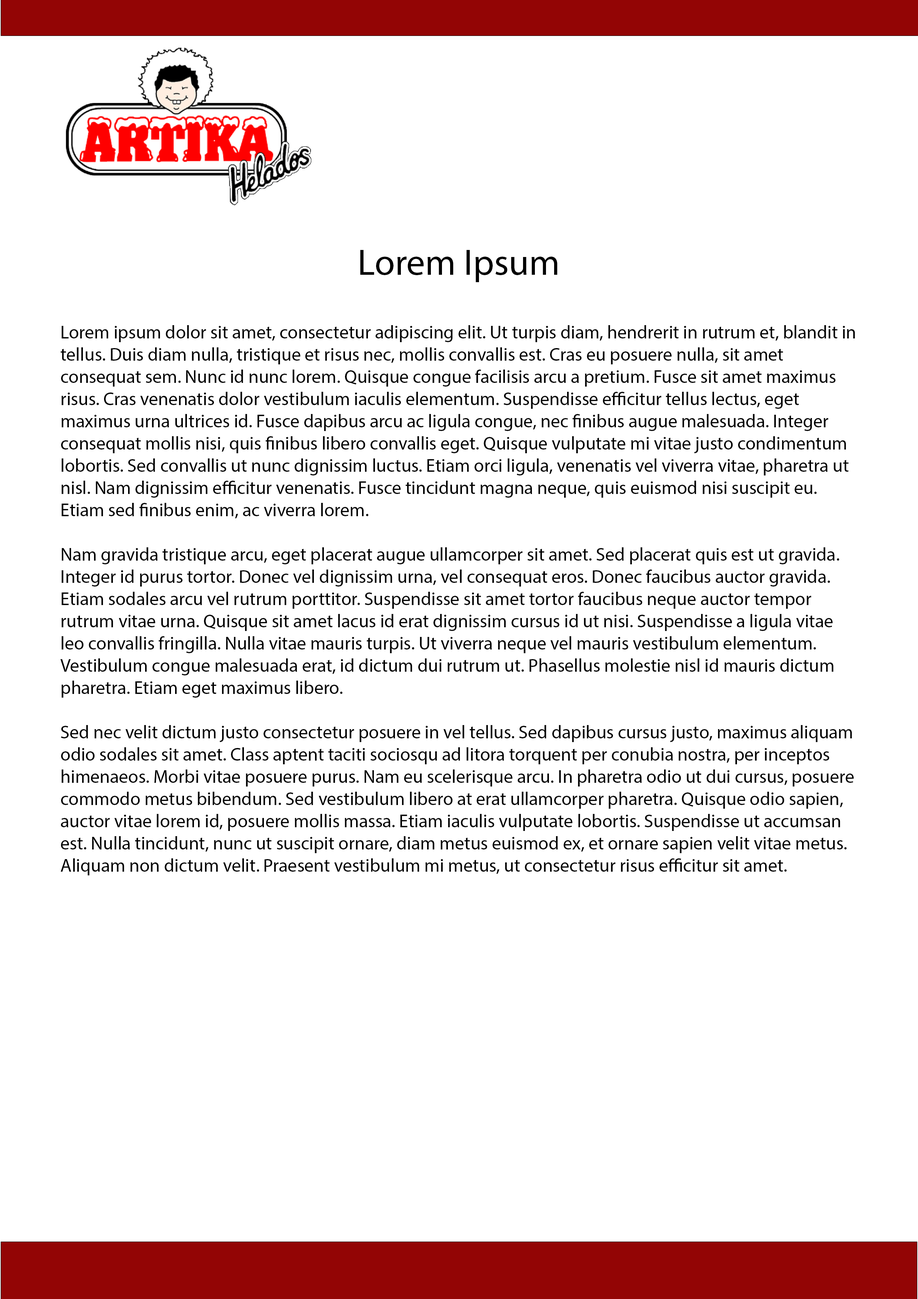
<style>
.page{position:relative;width:918px;height:1299px;background:#ffffff}
.page>*{position:absolute;margin:0}
.t1{font:37px "MyriadPro-Regular";color:#000000}
.t2{font:18.5px "MyriadPro-Regular";color:#000000}
</style>
<div class="page">
<p class="t1" style="left:360px;top:250px;width:198px;height:32px">Lorem Ipsum</p>
<p class="t2" style="left:60px;top:325px;width:795px;height:550px">Lorem ipsum dolor sit amet, consectetur adipiscing elit. Ut turpis diam, hendrerit in rutrum et, blandit in tellus. Duis diam nulla, tristique et risus nec, mollis convallis est. Cras eu posuere nulla, sit amet consequat sem. Nunc id nunc lorem. Quisque congue facilisis arcu a pretium. Fusce sit amet maximus risus. Cras venenatis dolor vestibulum iaculis elementum. Suspendisse efficitur tellus lectus, eget maximus urna ultrices id. Fusce dapibus arcu ac ligula congue, nec finibus augue malesuada. Integer consequat mollis nisi, quis finibus libero convallis eget. Quisque vulputate mi vitae justo condimentum lobortis. Sed convallis ut nunc dignissim luctus. Etiam orci ligula, venenatis vel viverra vitae, pharetra ut nisl. Nam dignissim efficitur venenatis. Fusce tincidunt magna neque, quis euismod nisi suscipit eu. Etiam sed finibus enim, ac viverra lorem.<br><br>Nam gravida tristique arcu, eget placerat augue ullamcorper sit amet. Sed placerat quis est ut gravida. Integer id purus tortor. Donec vel dignissim urna, vel consequat eros. Donec faucibus auctor gravida. Etiam sodales arcu vel rutrum porttitor. Suspendisse sit amet tortor faucibus neque auctor tempor rutrum vitae urna. Quisque sit amet lacus id erat dignissim cursus id ut nisi. Suspendisse a ligula vitae leo convallis fringilla. Nulla vitae mauris turpis. Ut viverra neque vel mauris vestibulum elementum. Vestibulum congue malesuada erat, id dictum dui rutrum ut. Phasellus molestie nisl id mauris dictum pharetra. Etiam eget maximus libero.<br><br>Sed nec velit dictum justo consectetur posuere in vel tellus. Sed dapibus cursus justo, maximus aliquam odio sodales sit amet. Class aptent taciti sociosqu ad litora torquent per conubia nostra, per inceptos himenaeos. Morbi vitae posuere purus. Nam eu scelerisque arcu. In pharetra odio ut dui cursus, posuere commodo metus bibendum. Sed vestibulum libero at erat ullamcorper pharetra. Quisque odio sapien, auctor vitae lorem id, posuere mollis massa. Etiam iaculis vulputate lobortis. Suspendisse ut accumsan est. Nulla tincidunt, nunc ut suscipit ornare, diam metus euismod ex, et ornare sapien velit vitae metus. Aliquam non dictum velit. Praesent vestibulum mi metus, ut consectetur risus efficitur sit amet.</p>
</div>
